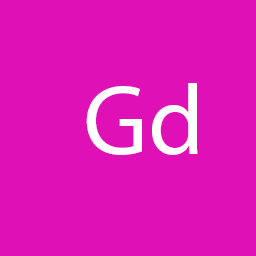
<style>
.page{position:relative;width:256px;height:256px;background:#df10b6}
.page>*{position:absolute;margin:0}
.t1{font:100px "MyriadPro-Regular";color:#ffffff}
</style>
<div class="page">
<p class="t1" style="left:86px;top:83px;width:112px;height:72px">Gd</p>
</div>
